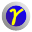
<style>
.page{position:relative;width:32px;height:32px;background:#ffffff}
.page>*{position:absolute;margin:0}
.t1{font:24px "MS-Gothic";color:#fcff00;font-weight:bold}
</style>
<div class="page">
<p class="t1" style="left:9px;top:8px;width:15px;height:18px">γ</p>
</div>
